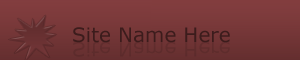
<style>
.page{position:relative;width:300px;height:60px}
.page>*{position:absolute;margin:0}
.t1{font:20px "Verdana";color:#3c1c1c}
.t2{font:20px "Verdana";color:#5e2c2c}
</style>
<div class="page">
<p class="t1" style="left:73px;top:27px;width:157px;height:16px">Site Name Here</p>
<p class="t2" style="left:73px;top:41px;width:157px;height:16px">Site Name Here</p>
</div>
